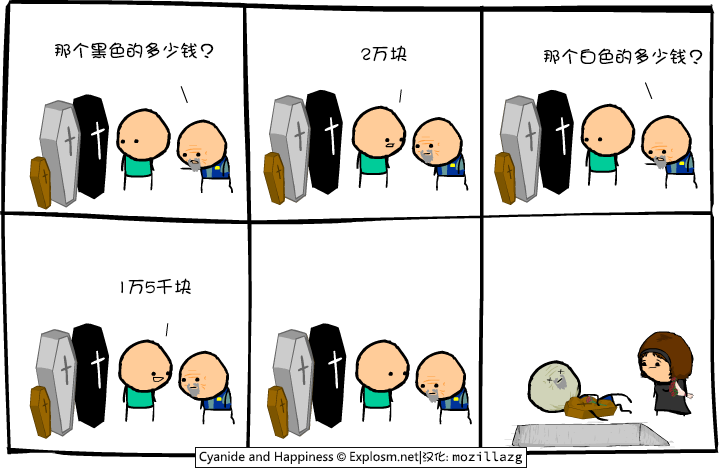
<style>
.page{position:relative;width:720px;height:475px;background:#ffffff}
.page>*{position:absolute;margin:0}
.t1{font:18px "DFGirl";color:#000000}
</style>
<div class="page">
<p class="t1" style="left:55px;top:42px;width:159px;height:17px">那个黑色的多少钱？</p>
<p class="t1" style="left:361px;top:45px;width:46px;height:17px">2万块</p>
<p class="t1" style="left:544px;top:48px;width:159px;height:17px">那个白色的多少钱？</p>
<p class="t1" style="left:121px;top:278px;width:70px;height:17px">1万5千块</p>
</div>
